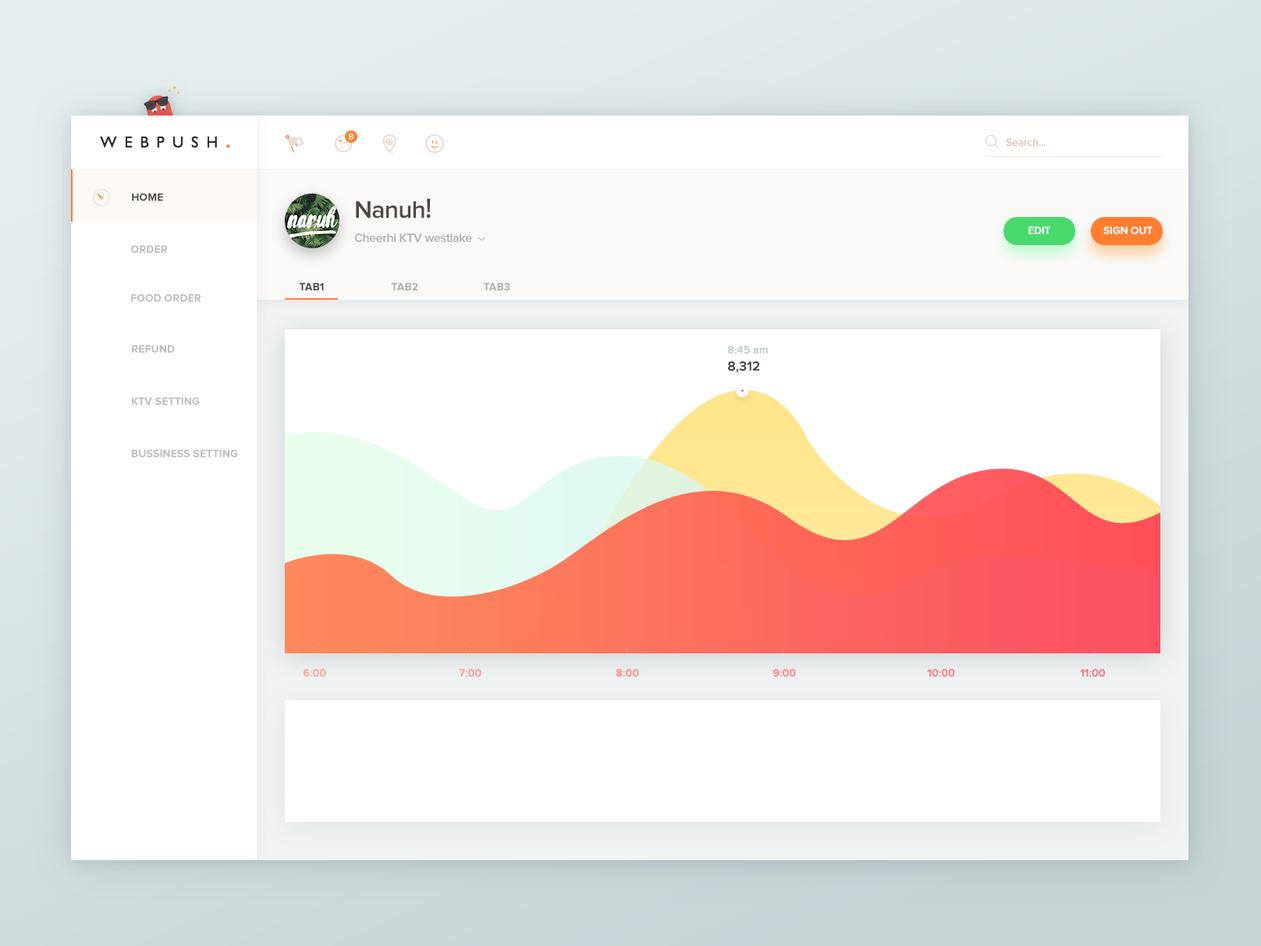
<style>
.page{position:relative;width:1261px;height:946px;background:#ffffff}
.page>*{position:absolute;margin:0}
.t1{font:15.6px "GillSans";letter-spacing:0.5em;color:#36302d}
.t2{font:23.4px "GillSans";letter-spacing:0.5em;color:#ff7f32}
.t3{font:9.4px "ProximaNova-Semibold";letter-spacing:-0.02em;color:#ffffff}
.t4{font:10.9px "ProximaNova-Semibold";letter-spacing:-0.02em;color:#d7c0b4}
.t5{font:10.9px "ProximaNova-Bold";letter-spacing:0.014em;color:#4f453f;text-transform:uppercase}
.t6{font:24.9px "ProximaNova-Semibold";letter-spacing:-0.02em;color:#4f453f}
.t7{font:24.9px "AdobeHeitiStd-Regular";letter-spacing:-0.02em;color:#4f453f}
.t8{font:12.5px "ProximaNova-Semibold";letter-spacing:-0.02em;color:#b1aeab}
.t9{font:10.9px "ProximaNova-Bold";letter-spacing:-0.02em;color:#ffffff}
.t10{font:10.9px "ProximaNova-Bold";letter-spacing:0.014em;color:#bfbcbb;text-transform:uppercase}
.t11{font:10.9px "ProximaNova-Bold";letter-spacing:0.014em;color:#b1aeab;text-transform:uppercase}
.t12{font:10.9px "ProximaNova-Semibold";letter-spacing:0.014em;color:#c3cccc}
.t13{font:13.3px "ProximaNova-Semibold";letter-spacing:0.014em;color:#4f453f;text-transform:uppercase}
.t14{font:10.9px "ProximaNova-Semibold";letter-spacing:0.014em;color:#f9a999}
.t15{font:10.9px "ProximaNova-Semibold";letter-spacing:0.014em;color:#f99f95}
.t16{font:10.9px "ProximaNova-Semibold";letter-spacing:0.014em;color:#f99490}
.t17{font:10.9px "ProximaNova-Semibold";letter-spacing:0.014em;color:#f98a8c}
.t18{font:10.9px "ProximaNova-Semibold";letter-spacing:0.014em;color:#f98087}
.t19{font:10.9px "ProximaNova-Semibold";letter-spacing:0.014em;color:#f97884}
</style>
<div class="page">
<p class="t1" style="left:100px;top:136px;width:130px;height:12px">WEBPUSH<span class="t2">.</span></p>
<p class="t3" style="left:348px;top:133px;width:5px;height:7px;opacity:0.9">8</p>
<p class="t4" style="left:1006px;top:138px;width:40px;height:8px">Search...</p>
<p class="t5" style="left:132px;top:193px;width:31px;height:8px">Home</p>
<p class="t6" style="left:356px;top:198px;width:75px;height:20px">Nanuh<span class="t7">!</span></p>
<p class="t8" style="left:354px;top:233px;width:118px;height:9px">Cheerhi KTV westlake</p>
<p class="t9" style="left:1028px;top:226px;width:22px;height:8px">EDIT</p>
<p class="t9" style="left:1103px;top:226px;width:49px;height:8px">SIGN OUT</p>
<p class="t10" style="left:131px;top:245px;width:36px;height:8px">ORder</p>
<p class="t5" style="left:299px;top:282px;width:25px;height:8px">TAB1</p>
<p class="t11" style="left:391px;top:282px;width:27px;height:8px">TAB2</p>
<p class="t11" style="left:483px;top:282px;width:27px;height:8px">TAB3</p>
<p class="t10" style="left:131px;top:294px;width:70px;height:8px">food order</p>
<p class="t10" style="left:132px;top:345px;width:43px;height:8px">refund</p>
<p class="t12" style="left:728px;top:346px;width:40px;height:7px">8:45 am</p>
<p class="t13" style="left:728px;top:361px;width:32px;height:11px">8,312</p>
<p class="t10" style="left:132px;top:397px;width:68px;height:8px">KTV setting</p>
<p class="t10" style="left:131px;top:449px;width:107px;height:8px">BUSSINESS SETTING</p>
<p class="t14" style="left:304px;top:669px;width:22px;height:7px">6:00</p>
<p class="t15" style="left:459px;top:669px;width:22px;height:7px">7:00</p>
<p class="t16" style="left:616px;top:669px;width:23px;height:7px">8:00</p>
<p class="t17" style="left:772px;top:669px;width:24px;height:7px">9:00</p>
<p class="t18" style="left:927px;top:669px;width:28px;height:7px">10:00</p>
<p class="t19" style="left:1080px;top:669px;width:25px;height:7px">11:00</p>
</div>
